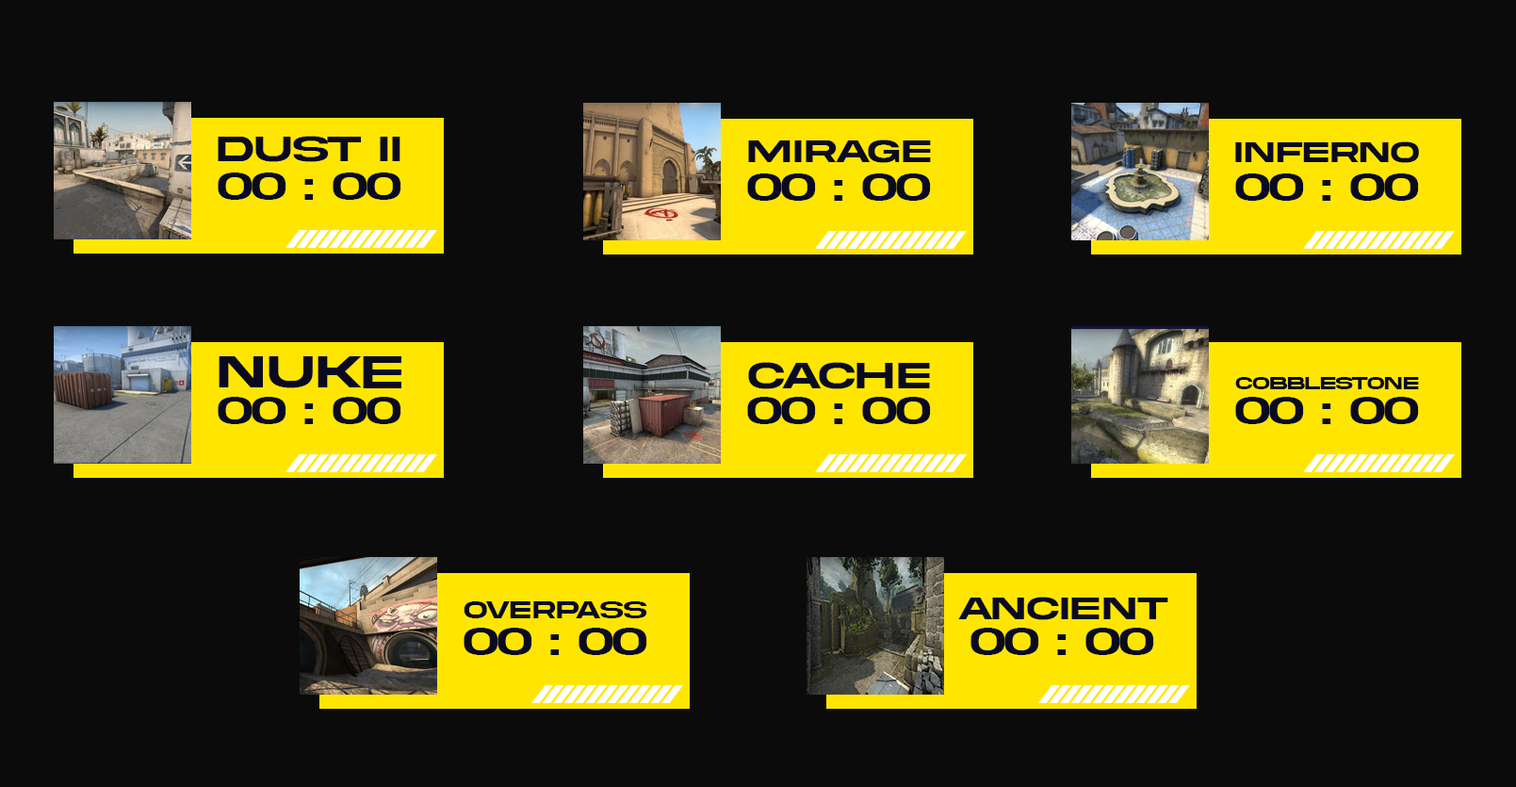
<style>
.page{position:relative;width:1516px;height:787px;background:#0b0b0b}
.page>*{position:absolute;margin:0}
.t1{font:37.7px "AkiraExpanded-Bold";color:#090a20}
.t2{font:33.9px "AkiraExpanded-Bold";color:#090a20}
.t3{font:29.9px "AkiraExpanded-Bold";color:#090a20}
.t4{font:39.2px "AkiraExpanded-Bold";color:#090a20}
.t5{font:47.2px "AkiraExpanded-Bold";color:#090a20}
.t6{font:38.5px "AkiraExpanded-Bold";color:#090a20}
.t7{font:17.4px "AkiraExpanded-Bold";color:#090a20}
.t8{font:24.7px "AkiraExpanded-Bold";color:#090a20}
</style>
<div class="page">
<p class="t1" style="left:218px;top:136px;width:182px;height:26px">dust II</p>
<p class="t2" style="left:748px;top:139px;width:183px;height:24px">mirage</p>
<p class="t3" style="left:1235px;top:141px;width:184px;height:22px">inferno</p>
<p class="t4" style="left:218px;top:172px;width:183px;height:28px">00 : 00</p>
<p class="t4" style="left:747px;top:173px;width:184px;height:28px">00 : 00</p>
<p class="t4" style="left:1235px;top:173px;width:184px;height:28px">00 : 00</p>
<p class="t5" style="left:219px;top:356px;width:182px;height:32px">Nuke</p>
<p class="t6" style="left:748px;top:362px;width:182px;height:27px">Cache</p>
<p class="t7" style="left:1235px;top:377px;width:184px;height:12px">cobblestone</p>
<p class="t4" style="left:218px;top:397px;width:183px;height:27px">00 : 00</p>
<p class="t4" style="left:747px;top:397px;width:184px;height:27px">00 : 00</p>
<p class="t4" style="left:1235px;top:397px;width:184px;height:27px">00 : 00</p>
<p class="t8" style="left:464px;top:601px;width:183px;height:17px">Overpass</p>
<p class="t2" style="left:958px;top:596px;width:210px;height:24px">ancient</p>
<p class="t4" style="left:464px;top:627px;width:183px;height:28px">00 : 00</p>
<p class="t4" style="left:970px;top:627px;width:184px;height:28px">00 : 00</p>
</div>
